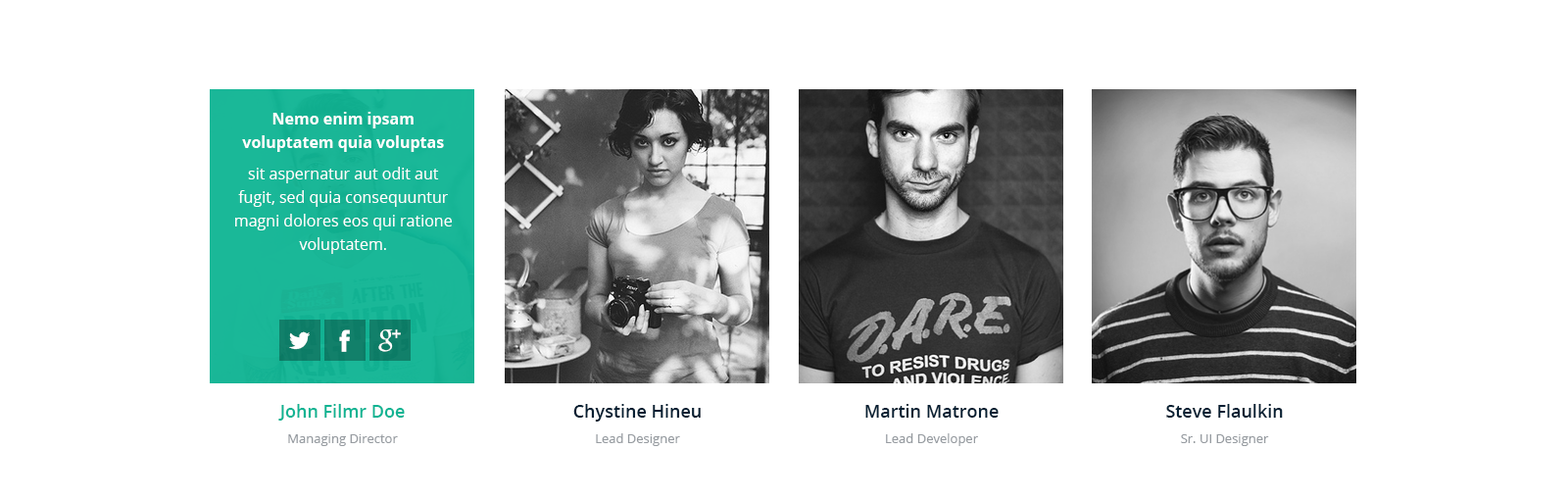
<style>
.page{position:relative;width:1568px;height:500px;background:#ffffff}
.page>*{position:absolute;margin:0}
.t1{font:15.7px/23.5px "OpenSans";color:#ffffff}
.t2{font:15.7px/23.5px "OpenSans-Bold";color:#ffffff}
.t3{font:15.7px/31.4px "OpenSans";color:#ffffff}
.t4{font:17.6px "OpenSans-Semibold";color:#0eb493}
.t5{font:17.6px "OpenSans-Semibold";color:#062033}
.t6{font:12.7px "OpenSans";color:#979ca1}
</style>
<div class="page">
<p class="t1" style="left:235px;top:112px;width:217px;height:142px;text-align:center"><span class="t2">Nemo enim ipsam <br>voluptatem quia voluptas <br></span><span class="t3">sit aspernatur aut odit aut </span>fugit, sed quia consequuntur magni dolores eos qui ratione voluptatem.</p>
<p class="t4" style="left:278px;top:404px;width:127px;height:16px">John Filmr Doe</p>
<p class="t5" style="left:573px;top:404px;width:128px;height:17px">Chystine Hineu</p>
<p class="t5" style="left:865px;top:404px;width:134px;height:13px">Martin Matrone</p>
<p class="t5" style="left:1166px;top:404px;width:117px;height:13px">Steve Flaulkin</p>
<p class="t6" style="left:288px;top:434px;width:110px;height:12px">Managing Director</p>
<p class="t6" style="left:596px;top:433px;width:84px;height:13px">Lead Designer</p>
<p class="t6" style="left:886px;top:433px;width:92px;height:13px">Lead Developer</p>
<p class="t6" style="left:1181px;top:434px;width:88px;height:12px">Sr. UI Designer</p>
</div>
